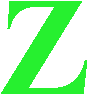
<style>
.page{position:relative;width:88px;height:95px;background:#ffffff}
.page>*{position:absolute;margin:0}
.t1{font:140px "TimesNewRomanPS-BoldMT";color:#26f02f}
</style>
<div class="page">
<p class="t1" style="left:1px;top:1px;width:86px;height:93px">Z</p>
</div>
